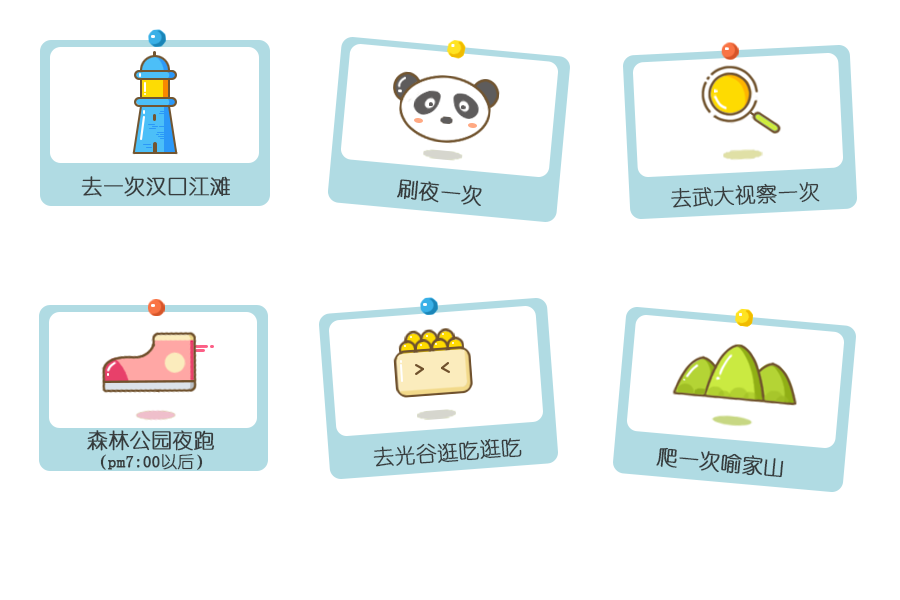
<style>
.page{position:relative;width:900px;height:600px;background:#ffffff}
.page>*{position:absolute;margin:0}
.t1{font:20.8px "YouYuan";color:#373c3d;font-weight:bold}
.t2{font:16.7px "YouYuan";color:#373c3d;font-weight:bold}
</style>
<div class="page">
<p class="t1" style="left:81px;top:176px;width:149px;height:21px">去一次汉口江滩</p>
<p class="t1" style="left:397px;top:179px;width:85px;height:27px;rotate:5deg">刷夜一次</p>
<p class="t1" style="left:671px;top:182px;width:149px;height:26px;rotate:-3deg">去武大视察一次</p>
<p class="t1" style="left:87px;top:430px;width:128px;height:21px">森林公园夜跑</p>
<p class="t1" style="left:373px;top:438px;width:149px;height:29px;rotate:-4deg">去光谷逛吃逛吃</p>
<p class="t1" style="left:656px;top:447px;width:128px;height:31px;rotate:5deg">爬一次喻家山</p>
<p class="t2" style="left:100px;top:453px;width:103px;height:17px">（pm7:00以后）</p>
</div>
